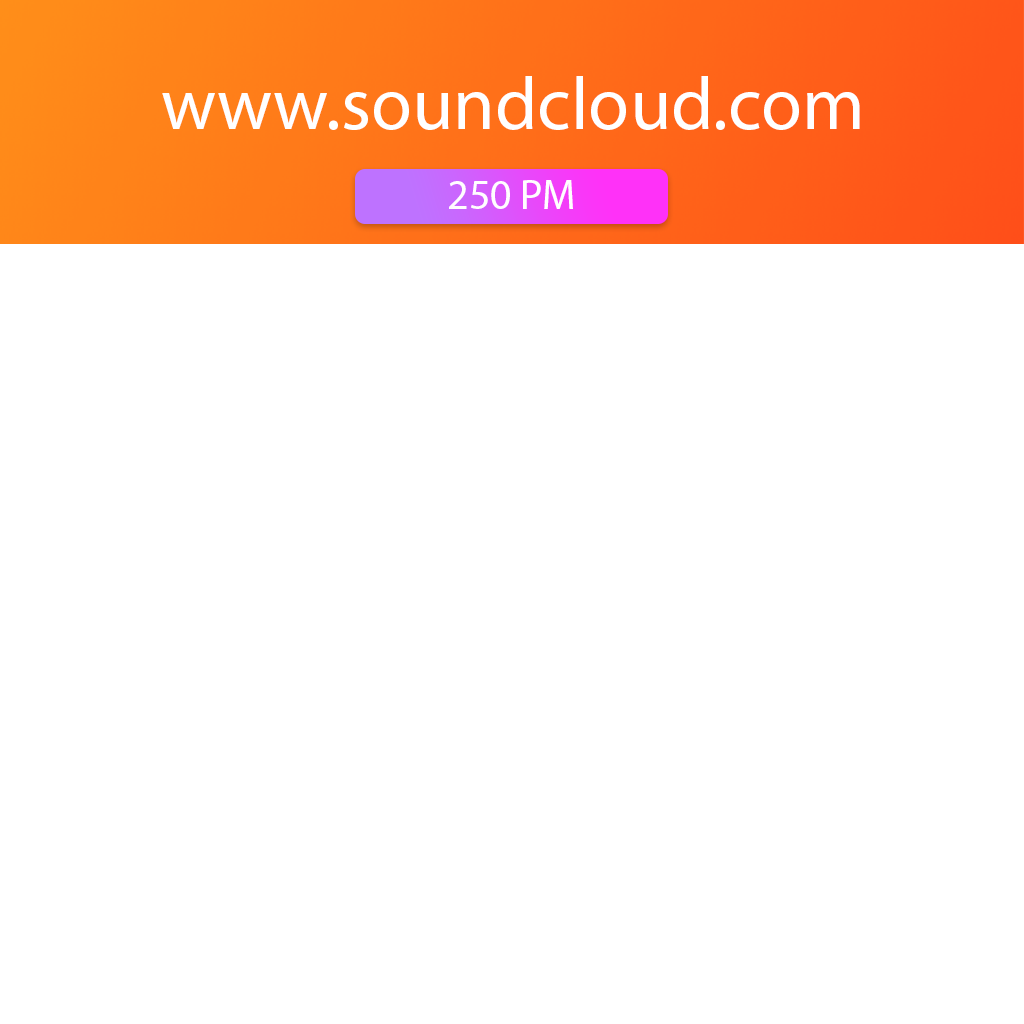
<style>
.page{position:relative;width:1024px;height:1024px;background:#ffffff}
.page>*{position:absolute;margin:0}
.t1{font:75px "MyriadPro-Regular";color:#ffffff}
.t2{font:41.7px "MyriadPro-Regular";color:#fffefe}
</style>
<div class="page">
<p class="t1" style="left:162px;top:76px;width:698px;height:54px">www.soundcloud.com</p>
<p class="t2" style="left:449px;top:180px;width:124px;height:29px">250 PM</p>
</div>
